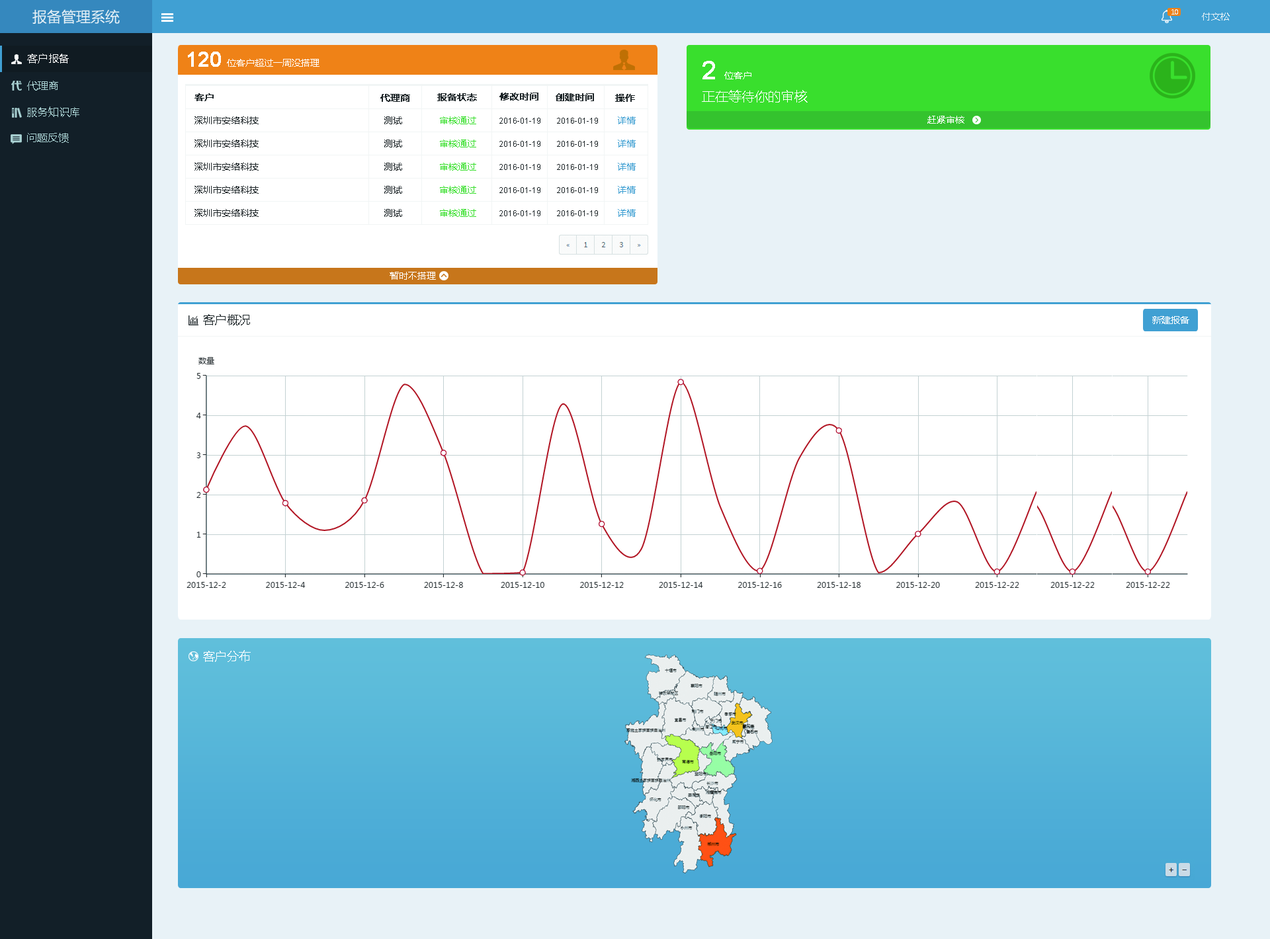
<style>
.page{position:relative;width:1270px;height:939px;background:#ffffff}
.page>*{position:absolute;margin:0}
.t1{font:14.5px "MicrosoftYaHei";color:#e8f2f7}
.t2{font:6.6px "MicrosoftYaHei";color:#e8f2f7}
.t3{font:9.3px "MicrosoftYaHei";color:#e8f2f7}
.t4{font:10.6px "MicrosoftYaHei";color:#ffffff}
.t5{font:19.8px "ArialMT";color:#ffffff;font-weight:bold}
.t6{font:9.3px "MicrosoftYaHei";color:#ffffff}
.t7{font:25.1px "ArialMT";color:#ffffff;font-weight:bold}
.t8{font:10.6px "MicrosoftYaHei";color:#abd3d4}
.t9{font:13.2px "MicrosoftYaHei";color:#ffffff}
.t10{font:9.3px "MicrosoftYaHei";color:#1d2528;font-weight:bold}
.t11{font:9.3px "MicrosoftYaHei";color:#1d2528}
.t12{font:9.3px "MicrosoftYaHei";color:#39df2d}
.t13{font:7.9px "ArialMT";color:#1d2528}
.t14{font:9.3px "MicrosoftYaHei";color:#40a0d3}
.t15{font:11.9px "MicrosoftYaHei";color:#1d2528}
.t16{font:11.9px "MicrosoftYaHei";color:#ffffff}
</style>
<div class="page">
<p class="t1" style="left:32px;top:9px;width:88px;height:15px">报备管理系统</p>
<p class="t2" style="left:1171px;top:9px;width:7px;height:6px">10</p>
<p class="t3" style="left:1202px;top:13px;width:27px;height:8px">付文松</p>
<p class="t4" style="left:27px;top:54px;width:42px;height:9px">客户报备</p>
<p class="t5" style="left:188px;top:52px;width:33px;height:15px">120</p>
<p class="t6" style="left:227px;top:59px;width:92px;height:8px">位客户超过一周没搭理</p>
<p class="t7" style="left:702px;top:61px;width:13px;height:18px">2</p>
<p class="t6" style="left:724px;top:71px;width:27px;height:8px">位客户</p>
<p class="t8" style="left:27px;top:81px;width:31px;height:10px">代理商</p>
<p class="t9" style="left:702px;top:90px;width:105px;height:13px">正在等待你的审核</p>
<p class="t10" style="left:194px;top:93px;width:20px;height:8px">客户</p>
<p class="t10" style="left:380px;top:94px;width:30px;height:8px">代理商</p>
<p class="t10" style="left:437px;top:93px;width:40px;height:8px">报备状态</p>
<p class="t10" style="left:499px;top:93px;width:39px;height:8px">修改时间</p>
<p class="t10" style="left:556px;top:93px;width:38px;height:8px">创建时间</p>
<p class="t10" style="left:615px;top:94px;width:20px;height:8px">操作</p>
<p class="t8" style="left:27px;top:106px;width:52px;height:11px">服务知识库</p>
<p class="t11" style="left:194px;top:116px;width:65px;height:8px">深圳市安络科技</p>
<p class="t11" style="left:384px;top:116px;width:18px;height:8px">测试</p>
<p class="t12" style="left:440px;top:116px;width:36px;height:8px">审核通过</p>
<p class="t13" style="left:499px;top:118px;width:41px;height:6px">2016-01-19</p>
<p class="t13" style="left:557px;top:118px;width:41px;height:6px">2016-01-19</p>
<p class="t14" style="left:618px;top:116px;width:18px;height:8px">详情</p>
<p class="t6" style="left:927px;top:116px;width:37px;height:8px">赶紧审核</p>
<p class="t8" style="left:27px;top:133px;width:42px;height:10px">问题反馈</p>
<p class="t11" style="left:194px;top:140px;width:65px;height:7px">深圳市安络科技</p>
<p class="t11" style="left:384px;top:140px;width:18px;height:7px">测试</p>
<p class="t12" style="left:440px;top:140px;width:36px;height:7px">审核通过</p>
<p class="t13" style="left:499px;top:141px;width:41px;height:6px">2016-01-19</p>
<p class="t13" style="left:557px;top:141px;width:41px;height:6px">2016-01-19</p>
<p class="t14" style="left:618px;top:140px;width:18px;height:7px">详情</p>
<p class="t11" style="left:194px;top:163px;width:65px;height:8px">深圳市安络科技</p>
<p class="t11" style="left:384px;top:163px;width:18px;height:8px">测试</p>
<p class="t12" style="left:440px;top:163px;width:36px;height:8px">审核通过</p>
<p class="t13" style="left:499px;top:164px;width:41px;height:6px">2016-01-19</p>
<p class="t13" style="left:557px;top:164px;width:41px;height:6px">2016-01-19</p>
<p class="t14" style="left:618px;top:163px;width:18px;height:8px">详情</p>
<p class="t11" style="left:194px;top:186px;width:65px;height:8px">深圳市安络科技</p>
<p class="t11" style="left:384px;top:186px;width:18px;height:8px">测试</p>
<p class="t12" style="left:440px;top:186px;width:36px;height:8px">审核通过</p>
<p class="t14" style="left:618px;top:186px;width:18px;height:8px">详情</p>
<p class="t13" style="left:499px;top:187px;width:41px;height:6px">2016-01-19</p>
<p class="t13" style="left:557px;top:187px;width:41px;height:6px">2016-01-19</p>
<p class="t11" style="left:194px;top:209px;width:65px;height:8px">深圳市安络科技</p>
<p class="t11" style="left:384px;top:209px;width:18px;height:8px">测试</p>
<p class="t12" style="left:440px;top:209px;width:36px;height:8px">审核通过</p>
<p class="t14" style="left:618px;top:209px;width:18px;height:8px">详情</p>
<p class="t13" style="left:499px;top:210px;width:41px;height:6px">2016-01-19</p>
<p class="t13" style="left:557px;top:210px;width:41px;height:6px">2016-01-19</p>
<p class="t6" style="left:390px;top:272px;width:46px;height:8px">暂时不搭理</p>
<p class="t15" style="left:203px;top:314px;width:47px;height:11px">客户概况</p>
<p class="t6" style="left:1152px;top:316px;width:37px;height:8px">新建报备</p>
<p class="t16" style="left:203px;top:650px;width:48px;height:12px">客户分布</p>
</div>
